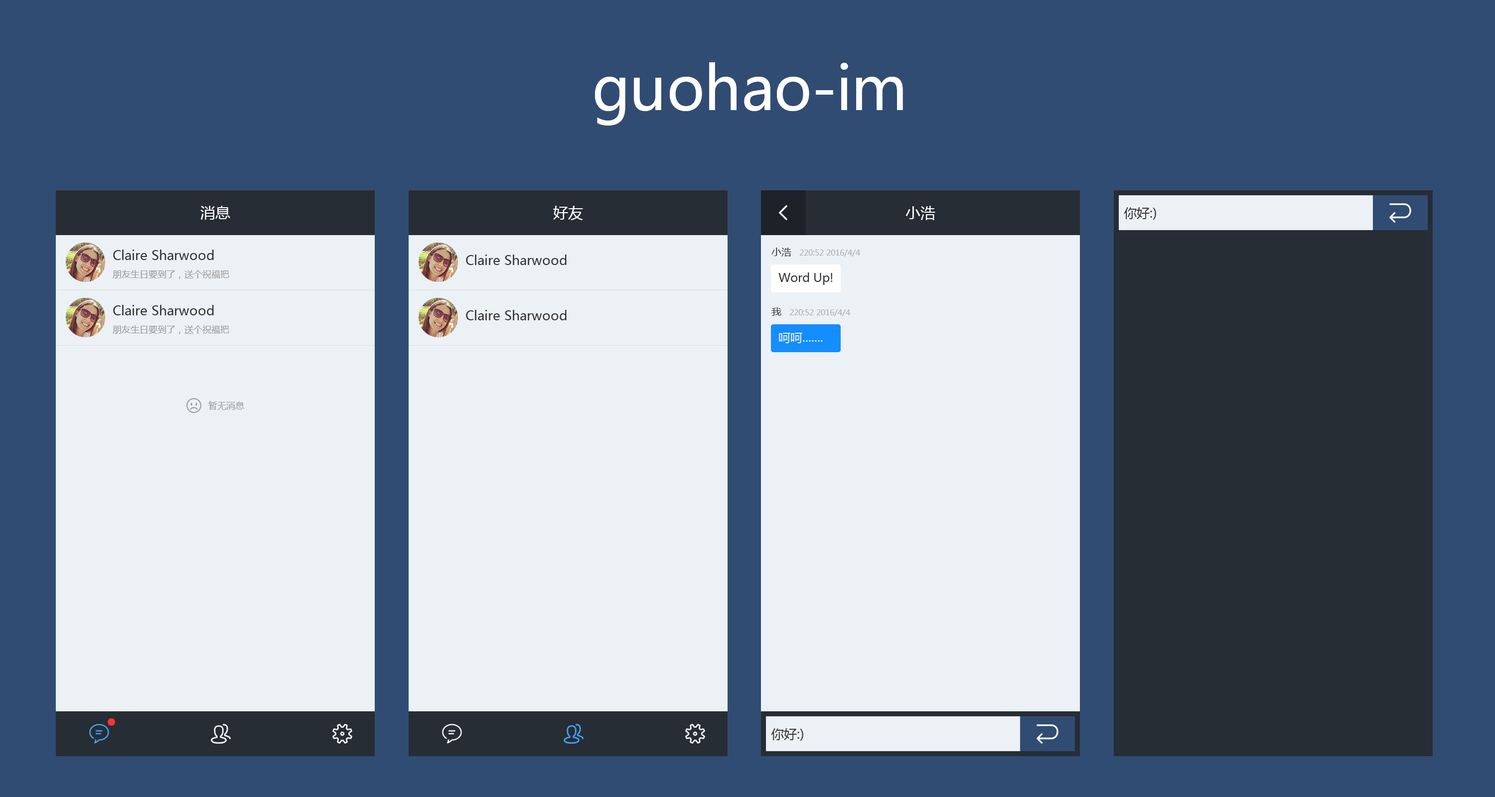
<style>
.page{position:relative;width:1495px;height:797px;background:#314c73}
.page>*{position:absolute;margin:0}
.t1{font:59.8px "MicrosoftYaHei";color:#ffffff}
.t2{font:15px "MicrosoftYaHei";color:#ffffff}
.t3{font:13px "MicrosoftYaHei";color:#333333}
.t4{font:10px "MicrosoftYaHei";color:#333333}
.t5{font:8px "MicrosoftYaHei";color:#abaeb2}
.t6{font:9px "MicrosoftYaHei";color:#999999}
.t7{font:12px "MicrosoftYaHei";color:#333333}
.t8{font:12px "MicrosoftYaHei";color:#ecf1f5}
</style>
<div class="page">
<p class="t1" style="left:595px;top:62px;width:308px;height:64px">guohao-im</p>
<p class="t2" style="left:200px;top:206px;width:30px;height:14px">消息</p>
<p class="t2" style="left:553px;top:206px;width:30px;height:14px">好友</p>
<p class="t2" style="left:906px;top:206px;width:30px;height:14px">小浩</p>
<p class="t3" style="left:1124px;top:207px;width:32px;height:13px">你好:)</p>
<p class="t3" style="left:113px;top:250px;width:101px;height:10px">Claire Sharwood</p>
<p class="t3" style="left:466px;top:255px;width:101px;height:10px">Claire Sharwood</p>
<p class="t4" style="left:772px;top:248px;width:19px;height:9px">小浩</p>
<p class="t5" style="left:799px;top:250px;width:61px;height:7px">220:52 2016/4/4</p>
<p class="t6" style="left:113px;top:270px;width:116px;height:9px">朋友生日要到了，送个祝福把</p>
<p class="t7" style="left:779px;top:273px;width:54px;height:12px">Word Up!</p>
<p class="t3" style="left:113px;top:305px;width:101px;height:11px">Claire Sharwood</p>
<p class="t3" style="left:466px;top:310px;width:101px;height:10px">Claire Sharwood</p>
<p class="t4" style="left:772px;top:308px;width:10px;height:8px">我</p>
<p class="t5" style="left:789px;top:310px;width:61px;height:6px">220:52 2016/4/4</p>
<p class="t6" style="left:113px;top:325px;width:116px;height:9px">朋友生日要到了，送个祝福把</p>
<p class="t8" style="left:779px;top:333px;width:44px;height:10px">呵呵.......</p>
<p class="t6" style="left:208px;top:401px;width:36px;height:9px">暂无消息</p>
<p class="t3" style="left:771px;top:729px;width:32px;height:12px">你好:)</p>
</div>
